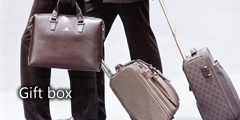
<style>
.page{position:relative;width:240px;height:120px}
.page>*{position:absolute;margin:0}
.t1{font:14px "MicrosoftYaHei";color:#ffffff}
</style>
<div class="page">
<p class="t1" style="left:19px;top:86px;width:53px;height:13px">Gift box</p>
</div>
